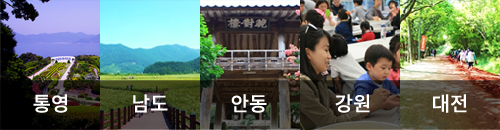
<style>
.page{position:relative;width:500px;height:130px}
.page>*{position:absolute;margin:0}
.t1{font:20px "NotoSansCJKkr-Medium";color:#ffffff}
</style>
<div class="page">
<p class="t1" style="left:33px;top:94px;width:35px;height:19px">통영</p>
<p class="t1" style="left:133px;top:94px;width:35px;height:19px">남도</p>
<p class="t1" style="left:231px;top:94px;width:36px;height:19px">안동</p>
<p class="t1" style="left:335px;top:94px;width:35px;height:19px">강원</p>
<p class="t1" style="left:433px;top:94px;width:34px;height:19px">대전</p>
</div>
